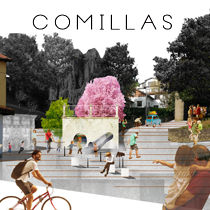
<style>
.page{position:relative;width:210px;height:210px;background:#ffffff}
.page>*{position:absolute;margin:0}
.t1{font:18.7px "SusannaRegular";letter-spacing:0.22em;color:#040000;font-weight:bold}
</style>
<div class="page">
<p class="t1" style="left:32px;top:14px;width:140px;height:16px">COMILLAS</p>
</div>
